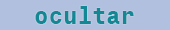
<style>
.page{position:relative;width:170px;height:30px;background:#b0c0de}
.page>*{position:absolute;margin:0}
.t1{font:24px "Monospace821BT-Bold";color:#138895}
</style>
<div class="page">
<p class="t1" style="left:35px;top:6px;width:99px;height:18px">ocultar</p>
</div>
